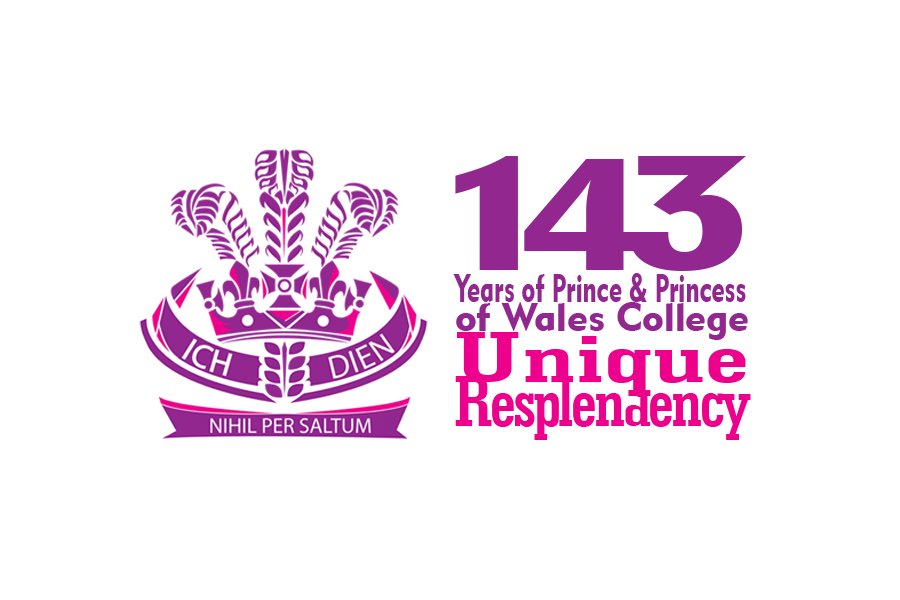
<style>
.page{position:relative;width:900px;height:600px;background:#ffffff}
.page>*{position:absolute;margin:0}
.t1{font:152.6px "Geometric706BT-BlackCondensedB";letter-spacing:-0.1em;color:#91278f;scale:1.81 1}
.t2{font:156.3px "Geometric706BT-BlackCondensedB";letter-spacing:-0.1em;color:#91278f;scale:1.77 1}
.t3{font:40.1px/28.2px "Geometric415BT-BlackA";color:#91278f;scale:0.63 1}
.t4{font:40.1px/28.2px "Geometric415BT-BlackA";color:#91278f}
.t5{font:73.6px/22px "GeometricSlab703BT-BoldCond";letter-spacing:-0.04em;color:#ed008c}
.t6{font:73.6px/22px "GeometricSlab703BT-BoldCond";color:#ed008c;scale:1.66 1}
.t7{font:48.9px/22px "GeometricSlab703BT-BoldCond";letter-spacing:-0.04em;color:#ed008c;scale:1.47 1}
</style>
<div class="page">
<p class="t1" style="left:455px;top:156px;width:291px;height:115px">14<span class="t2">3</span></p>
<p class="t3" style="left:453px;top:273px;width:295px;height:67px">Years of Prince &amp; Princess<br><span class="t4">of Wales College</span></p>
<p class="t5" style="left:455px;top:332px;width:296px;height:108px"><span class="t6">Unique<br><br></span>Resplen<span class="t7">d</span>ency</p>
</div>
